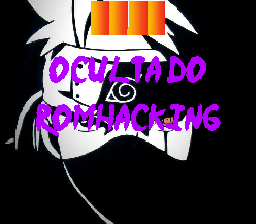
<style>
.page{position:relative;width:256px;height:224px;background:#000000}
.page>*{position:absolute;margin:0}
.t1{font:30px/48px "Ninja-Naruto";color:#b400ff}
</style>
<div class="page">
<p class="t1" style="left:36px;top:8px;width:185px;height:129px;text-align:center">VILA<br>OCULTA DO<br>ROMHACKING</p>
</div>
